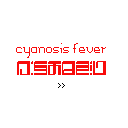
<style>
.page{position:relative;width:128px;height:128px;background:#ffffff}
.page>*{position:absolute;margin:0}
.t1{font:9px "Memoria";color:#f80b0b}
.t2{font:24px "EHRIVEVN_V-EXPERIENCE";color:#f80b0b}
.t3{font:8px "Memoria";color:#000000}
</style>
<div class="page">
<p class="t1" style="left:16px;top:43px;width:90px;height:15px">cyanosis fever</p>
<p class="t2" style="left:17px;top:61px;width:89px;height:14px">w,ased.x</p>
<p class="t3" style="left:58px;top:83px;width:7px;height:5px">&gt;&gt;</p>
</div>
